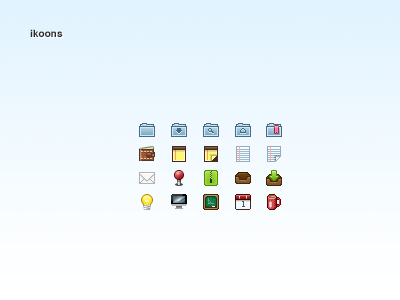
<style>
.page{position:relative;width:400px;height:300px}
.page>*{position:absolute;margin:0}
.t1{font:10px "Helvetica-Bold";color:#282828}
.t2{font:9px "ACaslonPro-Regular";color:#585858}
</style>
<div class="page">
<p class="t1" style="left:30px;top:29px;width:33px;height:8px">ikoons</p>
<p class="t2" style="left:242px;top:201px;width:3px;height:6px">1</p>
</div>
